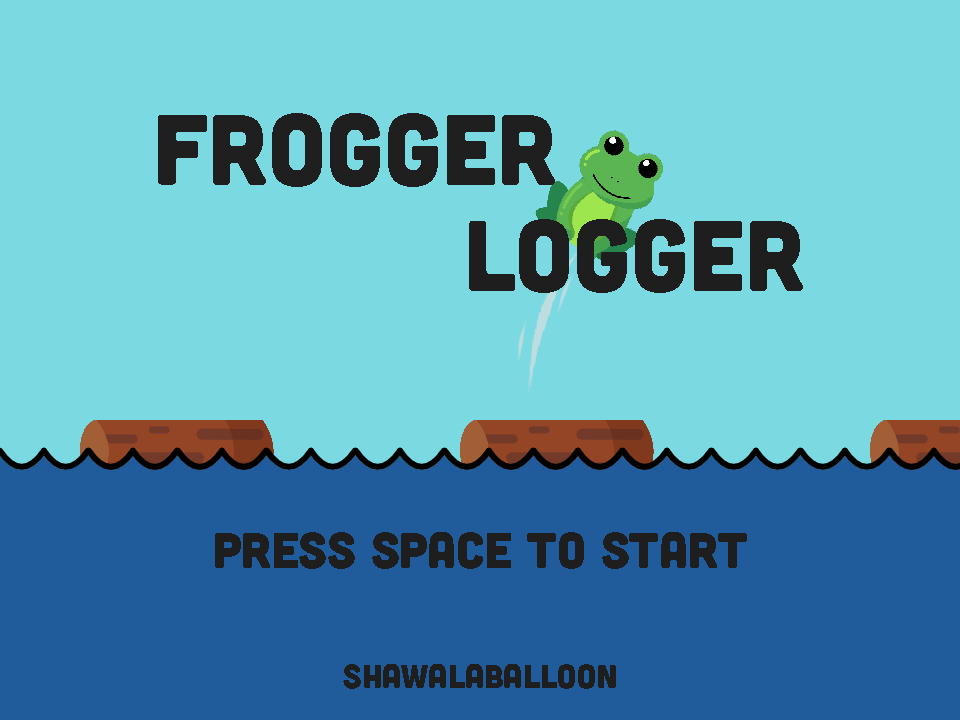
<style>
.page{position:relative;width:960px;height:720px;background:#7bd9e2}
.page>*{position:absolute;margin:0}
.t1{font:100px "Cubano-Regular";color:#1f1f1f}
.t2{font:100px "Cubano-Regular";color:#1e1e1e}
.t3{font:50px "Cubano-Regular";color:#1e1e1e}
.t4{font:33.3px "Cubano-Regular";color:#1e1e1e}
</style>
<div class="page">
<p class="t1" style="left:158px;top:113px;width:397px;height:74px">FROGGER</p>
<p class="t2" style="left:469px;top:219px;width:334px;height:74px">LOGGER</p>
<p class="t3" style="left:215px;top:532px;width:532px;height:37px">press space to start</p>
<p class="t4" style="left:343px;top:664px;width:273px;height:25px">Shawalaballoon</p>
</div>
